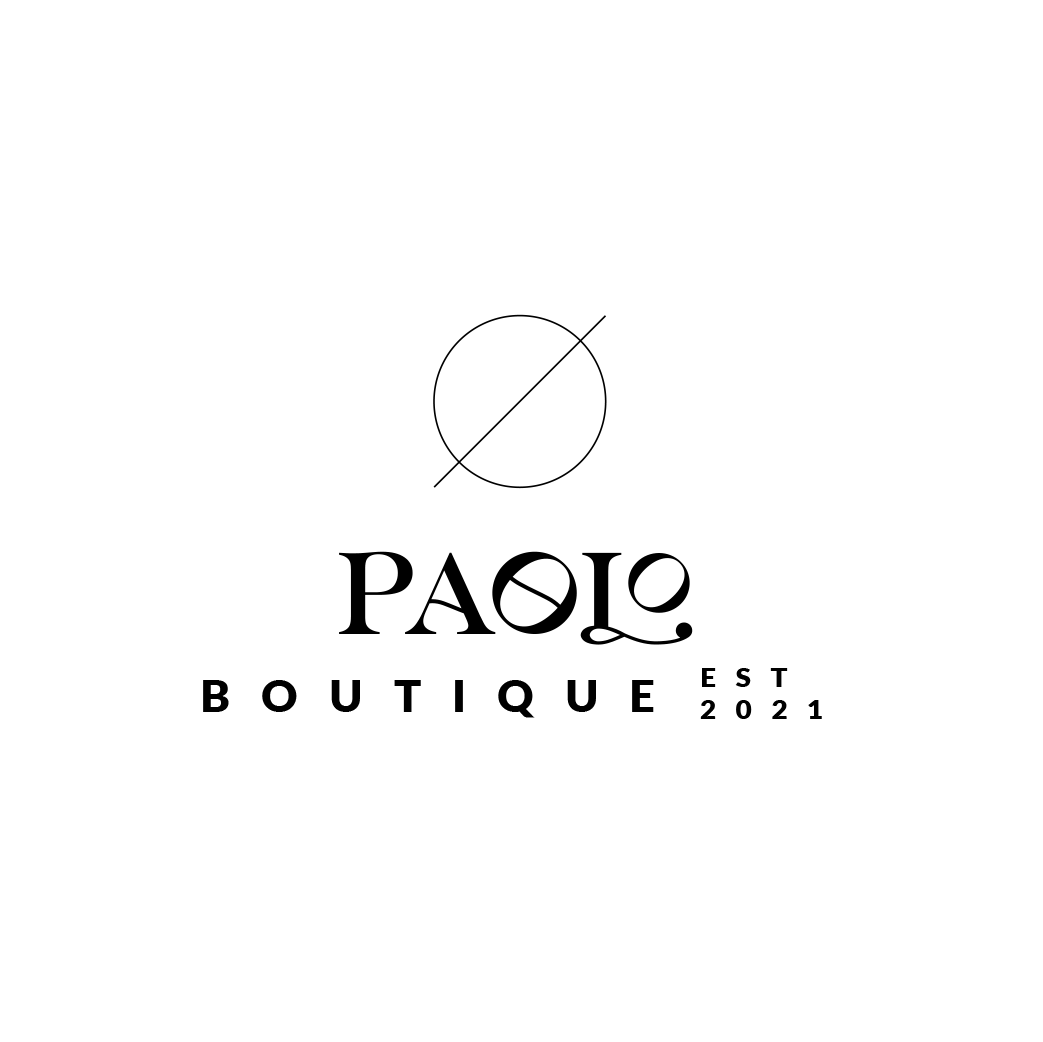
<style>
.page{position:relative;width:1043px;height:1042px;background:#ffffff}
.page>*{position:absolute;margin:0}
.t1{font:116.4px "LorettoRegular";color:#000000;text-transform:uppercase}
.t2{font:27.3px "Lato-Black";letter-spacing:0.7em;color:#000000;text-transform:uppercase}
.t3{font:43.6px "Lato-Black";letter-spacing:0.7em;color:#000000;text-transform:uppercase}
</style>
<div class="page">
<p class="t1" style="left:339px;top:551px;width:354px;height:94px">PAOLO</p>
<p class="t2" style="left:700px;top:668px;width:122px;height:51px">EST<br>2021</p>
<p class="t3" style="left:203px;top:680px;width:451px;height:38px">BOUTIQUE</p>
</div>
